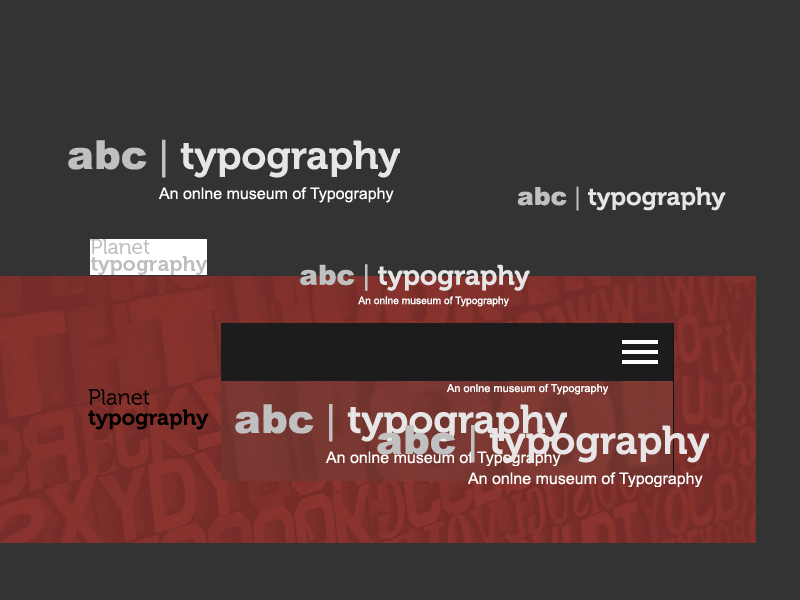
<style>
.page{position:relative;width:800px;height:600px;background:#333333}
.page>*{position:absolute;margin:0}
.t1{font:40px "Museo-700";color:#e7e5e5}
.t2{font:40px "Arial-Black";color:#c0c0c0}
.t3{font:40px "ArialMT";color:#c0c0c0}
.t4{font:16px "ArialMT";color:#ffffff}
.t5{font:25px "Museo-700";color:#e7e5e5}
.t6{font:25px "Arial-Black";color:#c0c0c0}
.t7{font:25px "ArialMT";color:#c0c0c0}
.t8{font:27.8px "Museo-700";color:#e7e5e5}
.t9{font:27.8px "Arial-Black";color:#c0c0c0}
.t10{font:27.8px "ArialMT";color:#c0c0c0}
.t11{font:10.3px "ArialMT";color:#ffffff}
.t12{font:21.8px/20.3px "Museo-700";color:#000000}
.t13{font:21.8px/20.3px "Museo-300";color:#000000}
.t14{font:11px "ArialMT";color:#ffffff}
</style>
<div class="page">
<p class="t1" style="left:68px;top:139px;width:332px;height:39px"><span class="t2">abc</span><span class="t3"> | </span>typography</p>
<p class="t4" style="left:158px;top:187px;width:236px;height:16px">An onlne museum of Typography</p>
<p class="t5" style="left:517px;top:186px;width:209px;height:25px"><span class="t6">abc</span><span class="t7"> | </span>typography</p>
<p class="t8" style="left:300px;top:264px;width:230px;height:27px"><span class="t9">abc</span><span class="t10"> | </span>typography</p>
<p class="t11" style="left:358px;top:296px;width:151px;height:11px">An onlne museum of Typography</p>
<p class="t12" style="left:88px;top:389px;width:121px;height:41px"><span class="t13">Planet<br></span>typography</p>
<p class="t14" style="left:446px;top:383px;width:163px;height:12px">An onlne museum of Typography</p>
</div>
